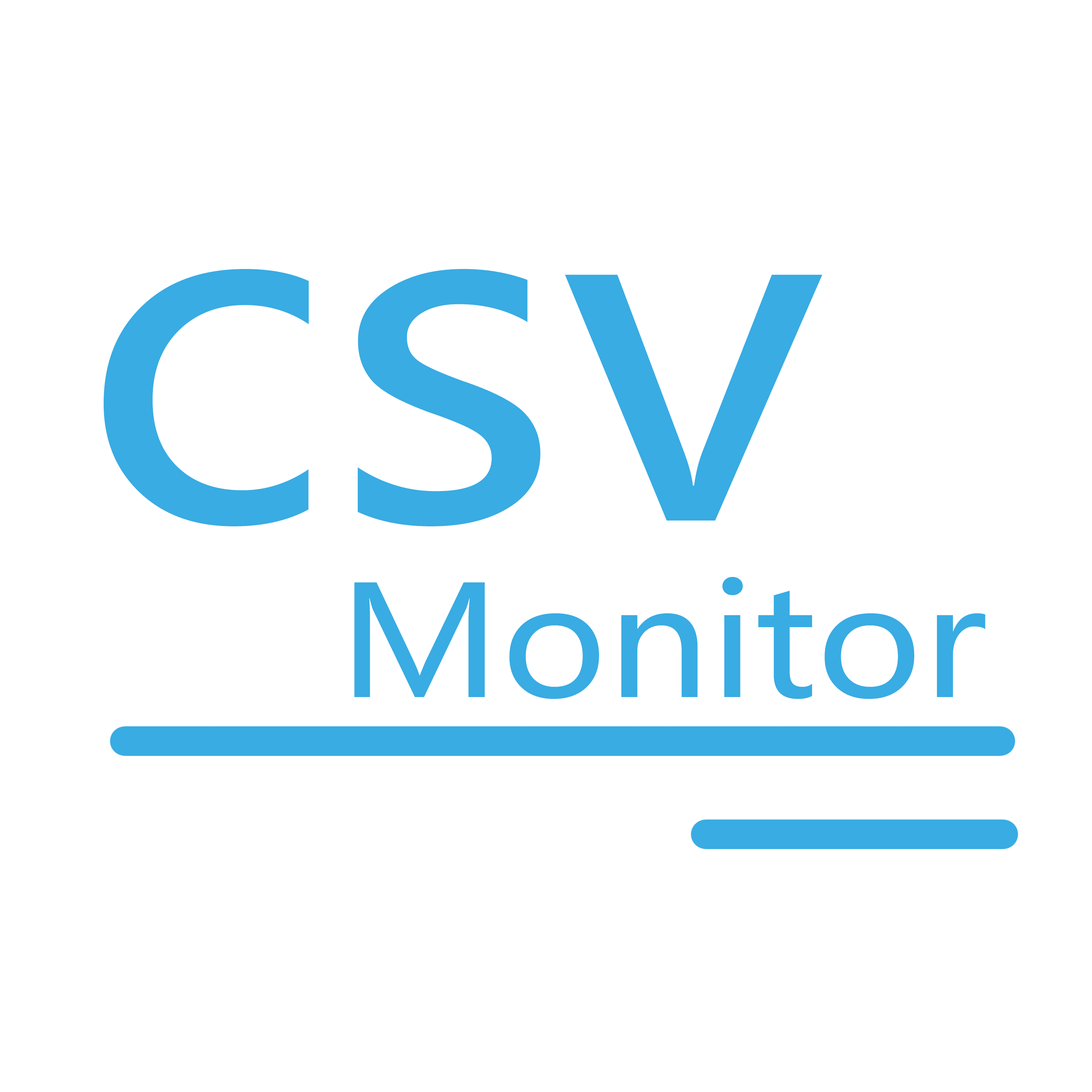
<style>
.page{position:relative;width:1092px;height:1092px;background:#ffffff}
.page>*{position:absolute;margin:0}
.t1{font:455px "MicrosoftYaHeiUI";color:#38ace3;scale:1.1 1}
.t2{font:151.7px "MicrosoftYaHeiUI";color:#38ace3;scale:1.1 1}
</style>
<div class="page">
<p class="t1" style="left:103px;top:269px;width:719px;height:257px">csv</p>
<p class="t2" style="left:354px;top:577px;width:631px;height:122px">Monitor</p>
</div>
